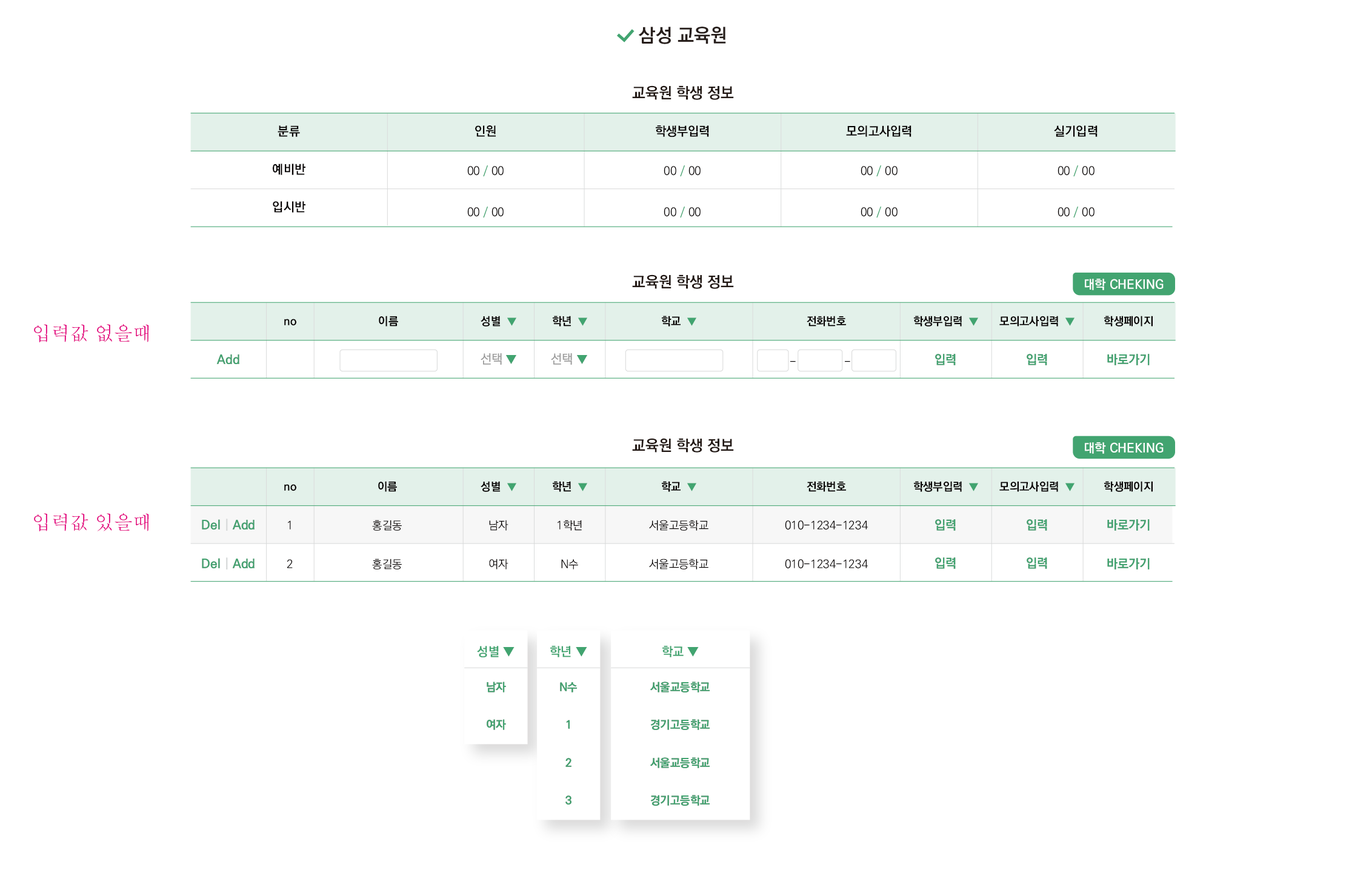
<style>
.page{position:relative;width:1366px;height:873px;background:#ffffff}
.page>*{position:absolute;margin:0}
.t1{font:18.9px "KoPubWorldDotumPB";color:#281e1c}
.t2{font:15.1px "KoPubWorldDotumPB";color:#231815}
.t3{font:12.6px "KoPubWorldDotumPB";color:#040000}
.t4{font:11.4px "KoPubWorldDotumPL";color:#040000}
.t5{font:11.4px "KoPubWorldDotumPL";color:#42a470}
.t6{font:12.6px "KoPubWorldDotumPB";color:#ffffff;text-transform:uppercase}
.t7{font:12.6px "KoPubWorldDotumPB";color:#ffffff}
.t8{font:11.4px "KoPubWorldDotumPB";color:#040000}
.t9{font:10.1px "KoPubWorldDotumPL";color:#42a470}
.t10{font:18.9px "AdobeMyungjoStd-Medium";color:#e3007f;text-transform:uppercase}
.t11{font:12.6px "KoPubWorldDotumPL"}
.t12{font:11.4px "KoPubWorldDotumPL"}
.t13{font:12.6px "KoPubWorldDotumPL";color:#9d9d9d}
.t14{font:12.6px "KoPubWorldDotumPB";color:#41a470}
.t15{font:12.6px "KoPubWorldDotumPB";color:#42a470}
.t16{font:12.6px "KoPubWorldDotumPB";color:#dbdcdc}
.t17{font:11.4px/37.9px "KoPubWorldDotumPB";color:#41a470}
.t18{font:11.4px/37.9px "KoPubWorldDotumPB";color:#42a470}
</style>
<div class="page">
<p class="t1" style="left:638px;top:27px;width:88px;height:17px">삼성 교육원</p>
<p class="t2" style="left:632px;top:85px;width:102px;height:15px">교육원 학생 정보</p>
<p class="t3" style="left:278px;top:125px;width:22px;height:12px">분류</p>
<p class="t3" style="left:475px;top:125px;width:21px;height:12px">인원</p>
<p class="t3" style="left:656px;top:125px;width:53px;height:12px">학생부입력</p>
<p class="t3" style="left:846px;top:125px;width:65px;height:12px">모의고사입력</p>
<p class="t3" style="left:1054px;top:125px;width:43px;height:12px">실기입력</p>
<p class="t3" style="left:273px;top:164px;width:32px;height:11px">예비반</p>
<p class="t4" style="left:467px;top:165px;width:37px;height:12px">00 <span class="t5">/</span> 00</p>
<p class="t4" style="left:663px;top:165px;width:37px;height:12px">00 <span class="t5">/</span> 00</p>
<p class="t4" style="left:860px;top:165px;width:37px;height:12px">00 <span class="t5">/</span> 00</p>
<p class="t4" style="left:1057px;top:165px;width:37px;height:12px">00 <span class="t5">/</span> 00</p>
<p class="t3" style="left:273px;top:201px;width:32px;height:12px">입시반</p>
<p class="t4" style="left:467px;top:207px;width:37px;height:11px">00 <span class="t5">/</span> 00</p>
<p class="t4" style="left:663px;top:207px;width:37px;height:11px">00 <span class="t5">/</span> 00</p>
<p class="t4" style="left:860px;top:207px;width:37px;height:11px">00 <span class="t5">/</span> 00</p>
<p class="t4" style="left:1057px;top:207px;width:37px;height:11px">00 <span class="t5">/</span> 00</p>
<p class="t2" style="left:632px;top:274px;width:102px;height:15px">교육원 학생 정보</p>
<p class="t6" style="left:1085px;top:279px;width:78px;height:11px"><span class="t7">대학 </span>cheking</p>
<p class="t6" style="left:1085px;top:279px;width:78px;height:11px"><span class="t7">대학 </span>cheking</p>
<p class="t8" style="left:379px;top:316px;width:19px;height:11px">이름</p>
<p class="t8" style="left:480px;top:316px;width:36px;height:11px">성별  <span class="t9">▼</span></p>
<p class="t8" style="left:552px;top:316px;width:35px;height:11px">학년  <span class="t9">▼</span></p>
<p class="t8" style="left:661px;top:316px;width:35px;height:11px">학교  <span class="t9">▼</span></p>
<p class="t8" style="left:806px;top:316px;width:40px;height:11px">전화번호</p>
<p class="t8" style="left:913px;top:316px;width:65px;height:11px">학생부입력  <span class="t9">▼</span></p>
<p class="t8" style="left:999px;top:316px;width:75px;height:11px">모의고사입력  <span class="t9">▼</span></p>
<p class="t8" style="left:1103px;top:316px;width:49px;height:11px">학생페이지</p>
<p class="t10" style="left:34px;top:324px;width:115px;height:19px">입력값 없을때</p>
<p class="t8" style="left:284px;top:319px;width:12px;height:7px">no</p>
<p class="t11" style="left:480px;top:353px;width:36px;height:12px">선택 <span class="t12">▼</span></p>
<p class="t13" style="left:480px;top:353px;width:36px;height:12px">선택 <span class="t5">▼</span></p>
<p class="t11" style="left:551px;top:353px;width:36px;height:12px">선택 <span class="t12">▼</span></p>
<p class="t13" style="left:551px;top:353px;width:36px;height:12px">선택 <span class="t5">▼</span></p>
<p class="t14" style="left:935px;top:354px;width:21px;height:11px">입력</p>
<p class="t15" style="left:935px;top:354px;width:21px;height:11px">입력</p>
<p class="t14" style="left:1026px;top:354px;width:21px;height:11px">입력</p>
<p class="t15" style="left:1026px;top:354px;width:21px;height:11px">입력</p>
<p class="t14" style="left:1107px;top:354px;width:42px;height:11px">바로가기</p>
<p class="t15" style="left:1107px;top:354px;width:42px;height:11px">바로가기</p>
<p class="t14" style="left:216px;top:354px;width:23px;height:10px">Add</p>
<p class="t15" style="left:216px;top:354px;width:23px;height:10px">Add</p>
<p class="t4" style="left:790px;top:361px;width:6px;height:1px">-</p>
<p class="t4" style="left:845px;top:361px;width:5px;height:1px">-</p>
<p class="t2" style="left:632px;top:438px;width:102px;height:15px">교육원 학생 정보</p>
<p class="t6" style="left:1085px;top:442px;width:78px;height:12px"><span class="t7">대학 </span>cheking</p>
<p class="t6" style="left:1085px;top:442px;width:78px;height:12px"><span class="t7">대학 </span>cheking</p>
<p class="t8" style="left:284px;top:484px;width:12px;height:7px">no</p>
<p class="t8" style="left:378px;top:481px;width:19px;height:11px">이름</p>
<p class="t8" style="left:480px;top:481px;width:36px;height:11px">성별  <span class="t9">▼</span></p>
<p class="t8" style="left:552px;top:481px;width:35px;height:11px">학년  <span class="t9">▼</span></p>
<p class="t8" style="left:661px;top:481px;width:35px;height:11px">학교  <span class="t9">▼</span></p>
<p class="t8" style="left:806px;top:481px;width:40px;height:11px">전화번호</p>
<p class="t8" style="left:913px;top:481px;width:65px;height:11px">학생부입력  <span class="t9">▼</span></p>
<p class="t8" style="left:999px;top:481px;width:75px;height:11px">모의고사입력  <span class="t9">▼</span></p>
<p class="t8" style="left:1103px;top:481px;width:49px;height:11px">학생페이지</p>
<p class="t10" style="left:34px;top:513px;width:115px;height:19px">입력값 있을때</p>
<p class="t14" style="left:202px;top:519px;width:52px;height:12px">Del | Add</p>
<p class="t15" style="left:202px;top:519px;width:52px;height:12px">Del<span class="t16"> | </span>Add</p>
<p class="t4" style="left:288px;top:520px;width:3px;height:10px">1</p>
<p class="t4" style="left:372px;top:520px;width:30px;height:11px">홍길동</p>
<p class="t4" style="left:489px;top:520px;width:19px;height:11px">남자</p>
<p class="t4" style="left:557px;top:520px;width:25px;height:11px">1학년</p>
<p class="t4" style="left:649px;top:520px;width:59px;height:11px">서울고등학교</p>
<p class="t4" style="left:785px;top:520px;width:83px;height:10px">010-1234-1234</p>
<p class="t14" style="left:935px;top:519px;width:21px;height:12px">입력</p>
<p class="t15" style="left:935px;top:519px;width:21px;height:12px">입력</p>
<p class="t14" style="left:1026px;top:519px;width:21px;height:12px">입력</p>
<p class="t15" style="left:1026px;top:519px;width:21px;height:12px">입력</p>
<p class="t14" style="left:1107px;top:519px;width:42px;height:12px">바로가기</p>
<p class="t15" style="left:1107px;top:519px;width:42px;height:12px">바로가기</p>
<p class="t14" style="left:202px;top:557px;width:52px;height:13px">Del | Add</p>
<p class="t15" style="left:202px;top:557px;width:52px;height:13px">Del<span class="t16"> | </span>Add</p>
<p class="t14" style="left:935px;top:557px;width:21px;height:12px">입력</p>
<p class="t15" style="left:935px;top:557px;width:21px;height:12px">입력</p>
<p class="t14" style="left:1026px;top:557px;width:21px;height:12px">입력</p>
<p class="t15" style="left:1026px;top:557px;width:21px;height:12px">입력</p>
<p class="t4" style="left:287px;top:559px;width:6px;height:9px">2</p>
<p class="t4" style="left:372px;top:559px;width:30px;height:11px">홍길동</p>
<p class="t4" style="left:489px;top:559px;width:19px;height:11px">여자</p>
<p class="t4" style="left:561px;top:559px;width:17px;height:11px">N수</p>
<p class="t4" style="left:649px;top:559px;width:59px;height:11px">서울고등학교</p>
<p class="t4" style="left:785px;top:559px;width:83px;height:10px">010-1234-1234</p>
<p class="t14" style="left:1107px;top:558px;width:42px;height:12px">바로가기</p>
<p class="t15" style="left:1107px;top:558px;width:42px;height:12px">바로가기</p>
<p class="t15" style="left:477px;top:646px;width:37px;height:11px">성별 ▼</p>
<p class="t15" style="left:550px;top:646px;width:37px;height:11px">학년 ▼</p>
<p class="t15" style="left:662px;top:646px;width:37px;height:11px">학교 ▼</p>
<p class="t17" style="left:487px;top:682px;width:19px;height:48px">남자<br>여자</p>
<p class="t18" style="left:487px;top:682px;width:19px;height:48px">남자<br>여자</p>
<p class="t17" style="left:560px;top:682px;width:17px;height:123px;text-align:center">N수<br>1<br>2<br>3</p>
<p class="t18" style="left:560px;top:682px;width:17px;height:123px;text-align:center">N수<br>1<br>2<br>3</p>
<p class="t17" style="left:650px;top:682px;width:60px;height:124px;text-align:center">서울교등학교<br>경기고등학교<br>서울교등학교<br>경기고등학교</p>
<p class="t18" style="left:650px;top:682px;width:60px;height:124px;text-align:center">서울교등학교<br>경기고등학교<br>서울교등학교<br>경기고등학교</p>
</div>
